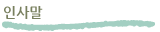
<style>
.page{position:relative;width:160px;height:32px;background:#ffffff}
.page>*{position:absolute;margin:0}
.t1{font:14px "NanumGothicBold";color:#79805f}
</style>
<div class="page">
<p class="t1" style="left:4px;top:6px;width:39px;height:13px">인사말</p>
</div>
